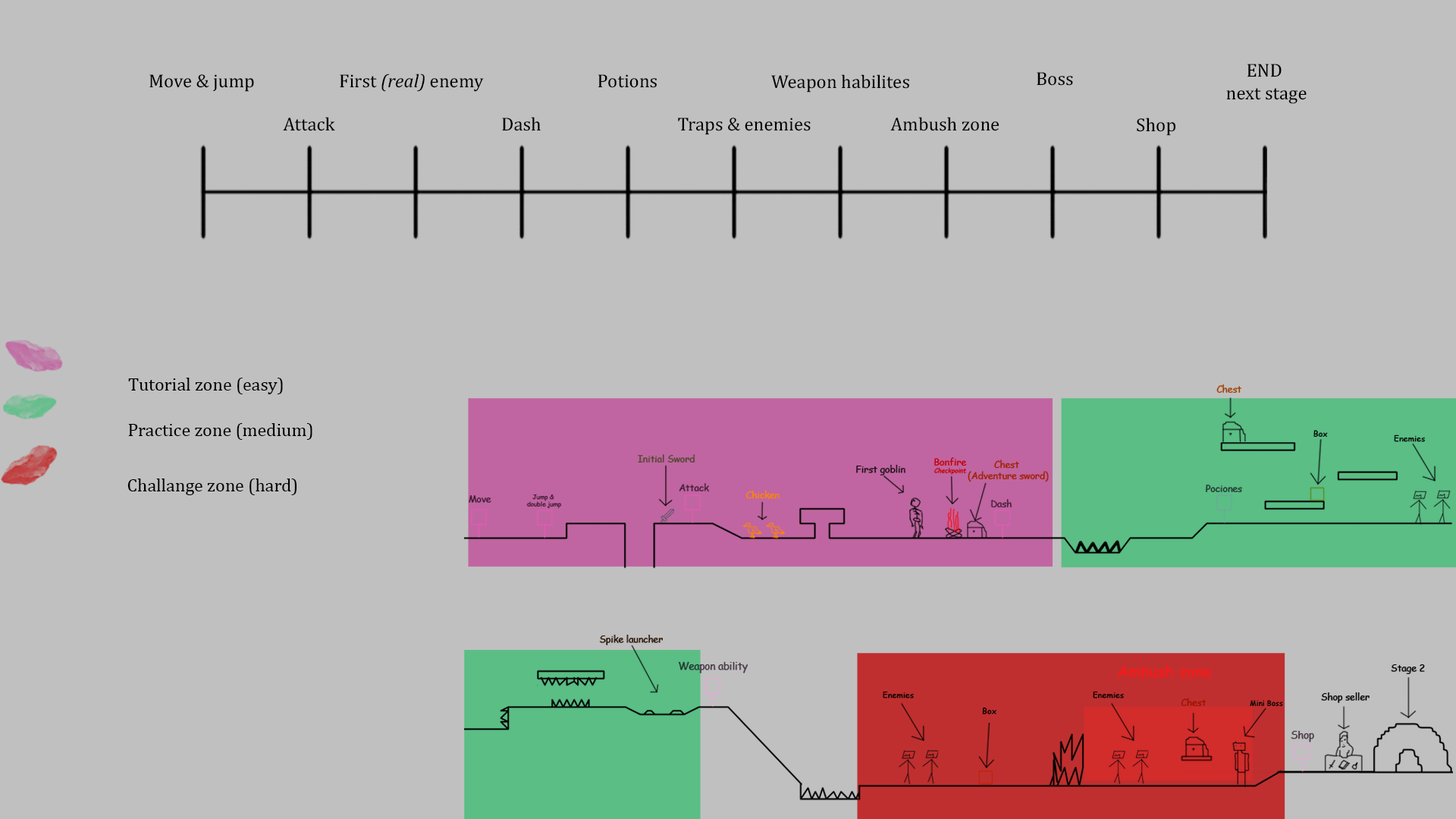
<style>
.page{position:relative;width:1456px;height:819px;background:#c0c0c0}
.page>*{position:absolute;margin:0}
.t1{font:18.8px "Cambria";color:#000000}
.t2{font:18.8px "Cambria-Italic";color:#000000}
.t3{font:18.2px "Cambria";color:#000000}
</style>
<div class="page">
<p class="t1" style="left:1226px;top:64px;width:81px;height:40px;text-align:center">END <br>next stage</p>
<p class="t1" style="left:149px;top:74px;width:105px;height:18px">Move &amp; jump</p>
<p class="t2" style="left:340px;top:74px;width:144px;height:18px"><span class="t1">First </span>(real)<span class="t1"> enemy</span></p>
<p class="t1" style="left:598px;top:74px;width:59px;height:14px">Potions</p>
<p class="t1" style="left:771px;top:74px;width:138px;height:19px">Weapon habilites</p>
<p class="t1" style="left:1037px;top:72px;width:36px;height:14px">Boss</p>
<p class="t1" style="left:283px;top:117px;width:52px;height:14px">Attack</p>
<p class="t1" style="left:502px;top:117px;width:39px;height:14px">Dash</p>
<p class="t1" style="left:678px;top:118px;width:133px;height:17px">Traps &amp; enemies</p>
<p class="t1" style="left:890px;top:117px;width:109px;height:14px">Ambush zone</p>
<p class="t1" style="left:1137px;top:118px;width:39px;height:18px">Shop</p>
<p class="t3" style="left:128px;top:378px;width:155px;height:16px">Tutorial zone (easy)</p>
<p class="t3" style="left:128px;top:423px;width:184px;height:17px">Practice zone (medium)</p>
<p class="t3" style="left:127px;top:479px;width:170px;height:16px">Challange zone (hard)</p>
</div>
